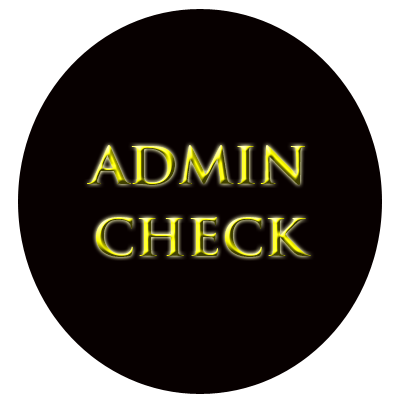
<style>
.page{position:relative;width:400px;height:400px;background:#070000}
.page>*{position:absolute;margin:0}
.t1{font:60px "TrajanPro-Bold"}
</style>
<div class="page">
<p class="t1" style="left:87px;top:145px;width:224px;height:112px;text-align:center">admin<br>check</p>
</div>
